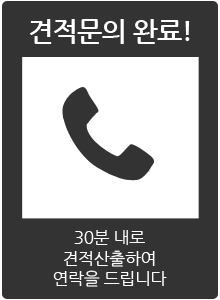
<style>
.page{position:relative;width:220px;height:300px;background:#333333}
.page>*{position:absolute;margin:0}
.t1{font:26.7px "NanumGothicBold";letter-spacing:-0.025em;color:#ffffff;text-transform:uppercase}
.t2{font:17.1px "NanumGothic";letter-spacing:-0.025em;color:#ffffff;text-transform:uppercase}
</style>
<div class="page">
<p class="t1" style="left:30px;top:19px;width:160px;height:25px">견적문의 완료!</p>
<p class="t2" style="left:53px;top:230px;width:114px;height:57px;text-align:center">30분 내로<br>견적산출하여<br>연락을 드립니다</p>
</div>
